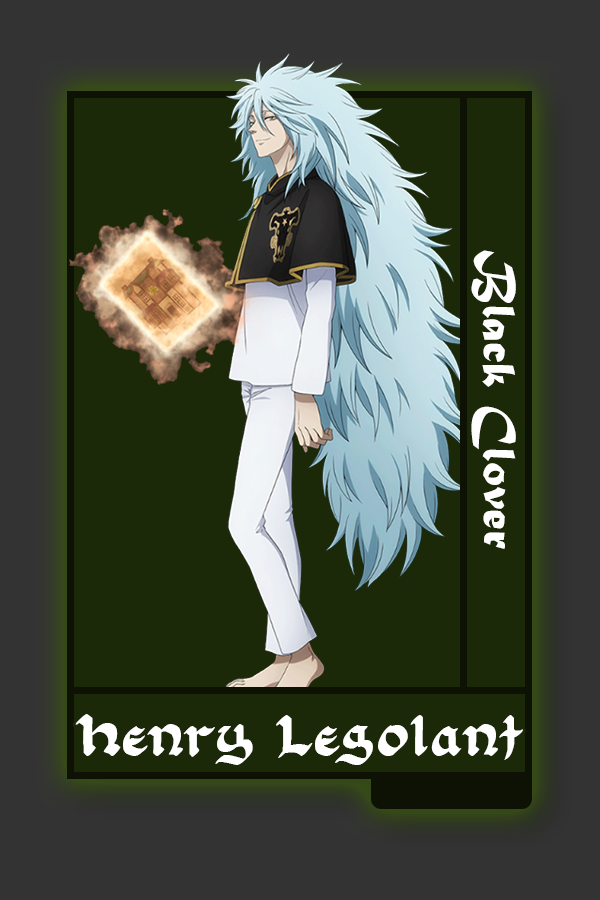
<style>
.page{position:relative;width:600px;height:900px;background:#1b2908}
.page>*{position:absolute;margin:0}
.t1{font:48.8px "MaturaMTScriptCapitals";color:#ffffff}
.t2{font:49.8px "FloranteatLaura";color:#ffffff}
</style>
<div class="page">
<p class="t1" style="left:471px;top:250px;width:45px;height:299px;rotate:90deg">Black Clover</p>
<p class="t2" style="left:75px;top:714px;width:448px;height:51px">Henry Legolant</p>
</div>
